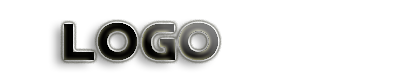
<style>
.page{position:relative;width:394px;height:80px;background:#ffffff}
.page>*{position:absolute;margin:0}
.t1{font:48px "Hagane"}
</style>
<div class="page">
<p class="t1" style="left:64px;top:23px;width:154px;height:37px">Logo</p>
</div>
